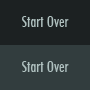
<style>
.page{position:relative;width:90px;height:90px;background:#323d3e}
.page>*{position:absolute;margin:0}
.t1{font:15px "Futura-CondensedMedium";color:#b0c0bf}
</style>
<div class="page">
<p class="t1" style="left:22px;top:16px;width:47px;height:11px">Start Over</p>
<p class="t1" style="left:22px;top:61px;width:47px;height:11px">Start Over</p>
</div>
